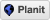
<style>
.page{position:relative;width:50px;height:20px}
.page>*{position:absolute;margin:0}
.t1{font:10px "HelveticaNeue-Bold";color:#444444}
</style>
<div class="page">
<p class="t1" style="left:18px;top:5px;width:27px;height:9px">Planit</p>
</div>
